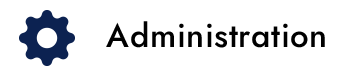
<style>
.page{position:relative;width:342px;height:78px;background:#ffffff}
.page>*{position:absolute;margin:0}
.t1{font:32.9px "Jost-Medium";letter-spacing:0.02em;color:#000000}
</style>
<div class="page">
<p class="t1" style="left:106px;top:21px;width:219px;height:27px">Administration</p>
</div>
